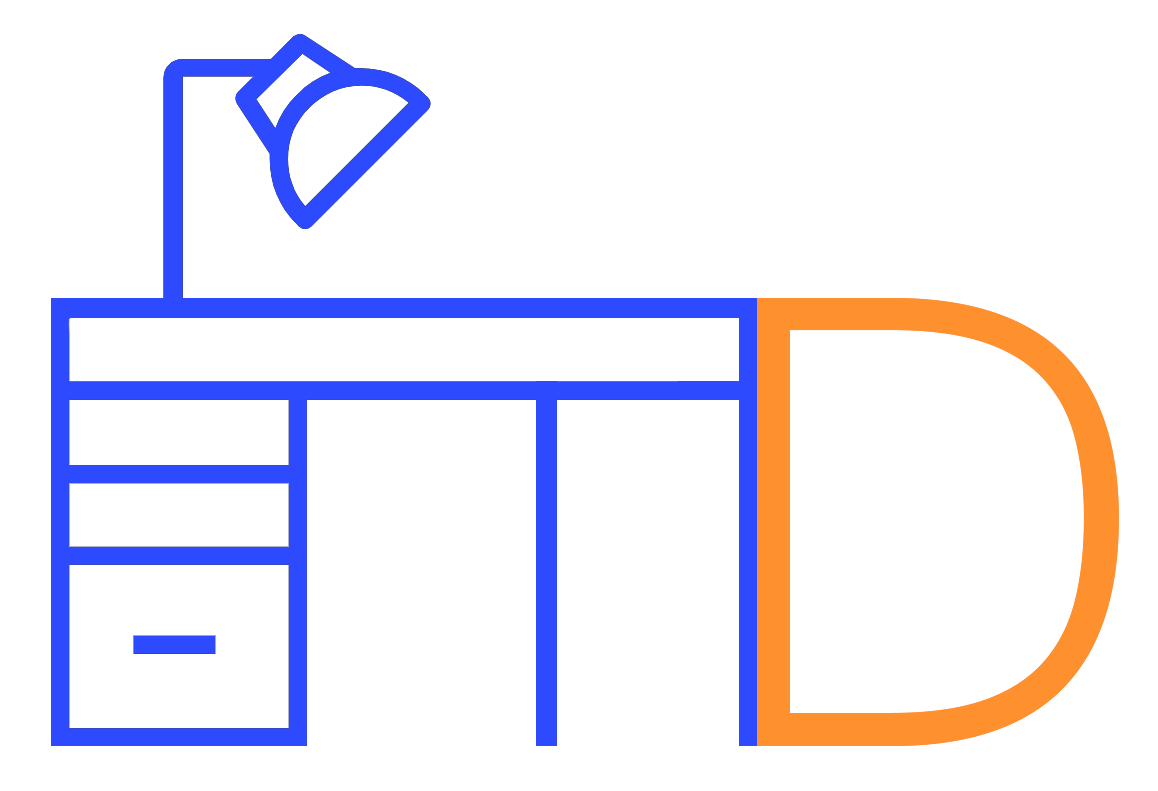
<style>
.page{position:relative;width:1158px;height:791px;background:#ffffff}
.page>*{position:absolute;margin:0}
.t1{font:837.6px "Microsoft-Yi-Baiti";color:#ff902e}
</style>
<div class="page">
<p class="t1" style="left:757px;top:298px;width:362px;height:448px">D</p>
</div>
